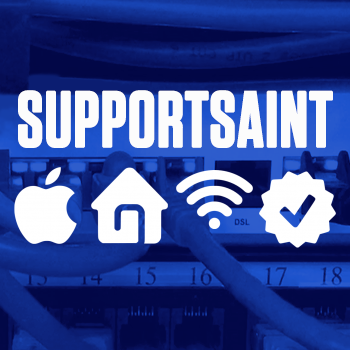
<style>
.page{position:relative;width:350px;height:350px}
.page>*{position:absolute;margin:0}
.t1{font:78px "Tungsten-Semibold";color:#fcfcfc;font-weight:bold;scale:0.92 1}
</style>
<div class="page">
<p class="t1" style="left:18px;top:90px;width:315px;height:58px">SUPPORTSAINT</p>
</div>
